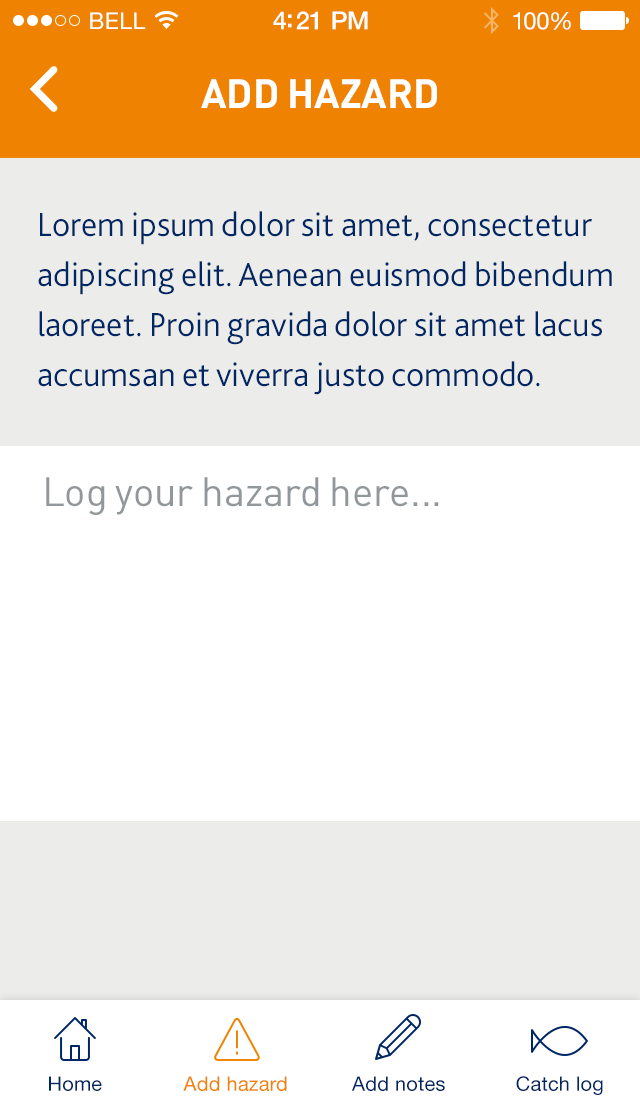
<style>
.page{position:relative;width:640px;height:1098px;background:#ffffff}
.page>*{position:absolute;margin:0}
.t1{font:23px "HelveticaNeue";letter-spacing:0.02em;color:#ffffff}
.t2{font:25px "HelveticaNeue-Medium";letter-spacing:-0.02em;color:#ffffff}
.t3{font:24px "HelveticaNeue";letter-spacing:-0.02em;color:#ffffff}
.t4{font:40px "DIN-Bold";color:#ffffff;text-transform:uppercase}
.t5{font:35px/50px "Bliss2-Light";color:#002663}
.t6{font:40px "DIN-Regular";color:#91979a}
.t7{font:20px "HelveticaNeue";letter-spacing:0.01em;color:#002663}
.t8{font:20px "HelveticaNeue";letter-spacing:0.01em;color:#ef8200}
</style>
<div class="page">
<p class="t1" style="left:90px;top:12px;width:56px;height:17px">BELL</p>
<p class="t2" style="left:273px;top:11px;width:95px;height:19px">4:21 PM</p>
<p class="t3" style="left:513px;top:12px;width:58px;height:18px">100%</p>
<p class="t4" style="left:201px;top:79px;width:236px;height:29px">add hazard</p>
<p class="t5" style="left:38px;top:211px;width:574px;height:184px">Lorem ipsum dolor sit amet, consectetur adipiscing elit. Aenean euismod bibendum laoreet. Proin gravida dolor sit amet lacus accumsan et viverra justo commodo.</p>
<p class="t6" style="left:46px;top:477px;width:393px;height:38px">Log your hazard here...</p>
<p class="t7" style="left:49px;top:1076px;width:53px;height:15px">Home</p>
<p class="t8" style="left:183px;top:1076px;width:104px;height:15px">Add hazard</p>
<p class="t7" style="left:352px;top:1076px;width:93px;height:15px">Add notes</p>
<p class="t7" style="left:516px;top:1076px;width:87px;height:19px">Catch log</p>
</div>
